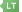
<style>
.page{position:relative;width:22px;height:12px;background:#ffffff}
.page>*{position:absolute;margin:0}
.t1{font:8px "ArialMT";letter-spacing:0.03em;color:#ffffff}
</style>
<div class="page">
<p class="t1" style="left:7px;top:2px;width:9px;height:7px">LT</p>
</div>
